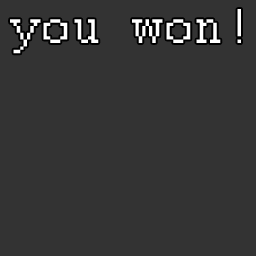
<style>
.page{position:relative;width:256px;height:256px;background:#333333}
.page>*{position:absolute;margin:0}
.t1{font:54.3px "Courier";color:#ffffff}
</style>
<div class="page">
<p class="t1" style="left:10px;top:9px;width:231px;height:45px">you won!</p>
</div>
